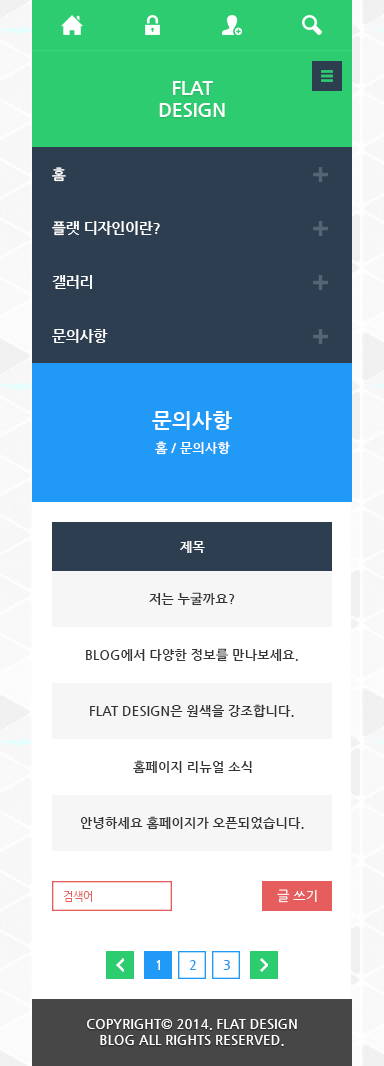
<style>
.page{position:relative;width:384px;height:1066px;background:#ffffff}
.page>*{position:absolute;margin:0}
.t1{font:18.7px "NanumGothicBold";color:#ffffff}
.t2{font:14.7px "NanumGothicBold";color:#ffffff}
.t3{font:21.3px "NanumGothicBold";color:#ffffff}
.t4{font:13.3px "NanumGothicBold";color:#ffffff}
.t5{font:13.3px "NanumGothicBold";color:#333333}
.t6{font:10.7px "NanumGothic";color:#e65d5d}
.t7{font:13.3px "NanumGothic";color:#ffffff}
.t8{font:13.3px "NanumGothicBold";color:#219af7}
</style>
<div class="page">
<p class="t1" style="left:159px;top:81px;width:66px;height:36px;text-align:center">FLAT<br>DESIGN</p>
<p class="t2" style="left:52px;top:167px;width:14px;height:15px">홈</p>
<p class="t2" style="left:52px;top:221px;width:108px;height:15px">플랫 디자인이란?</p>
<p class="t2" style="left:52px;top:275px;width:40px;height:14px">갤러리</p>
<p class="t2" style="left:52px;top:329px;width:56px;height:14px">문의사항</p>
<p class="t3" style="left:152px;top:411px;width:80px;height:19px">문의사항</p>
<p class="t4" style="left:155px;top:441px;width:75px;height:14px">홈 / 문의사항</p>
<p class="t4" style="left:180px;top:541px;width:25px;height:12px">제목</p>
<p class="t5" style="left:149px;top:592px;width:86px;height:14px">저는 누굴까요?</p>
<p class="t5" style="left:86px;top:648px;width:212px;height:14px">BLOG에서 다양한 정보를 만나보세요.</p>
<p class="t5" style="left:90px;top:704px;width:204px;height:14px">FLAT DESIGN은 원색을 강조합니다.</p>
<p class="t5" style="left:133px;top:760px;width:119px;height:14px">홈페이지 리뉴얼 소식</p>
<p class="t5" style="left:80px;top:816px;width:224px;height:14px">안녕하세요 홈페이지가 오픈되었습니다.</p>
<p class="t6" style="left:64px;top:891px;width:28px;height:11px">검색어</p>
<p class="t7" style="left:277px;top:889px;width:40px;height:14px">글 쓰기</p>
<p class="t4" style="left:156px;top:960px;width:4px;height:10px">1</p>
<p class="t8" style="left:189px;top:960px;width:7px;height:10px">2</p>
<p class="t8" style="left:223px;top:960px;width:7px;height:10px">3</p>
<p class="t4" style="left:87px;top:1019px;width:210px;height:27px;text-align:center">COPYRIGHT© 2014. FLAT DESIGN<br>BLOG ALL RIGHTS RESERVED.</p>
</div>
